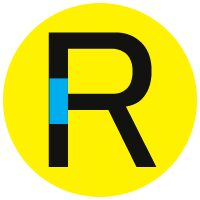
<style>
.page{position:relative;width:200px;height:200px;background:#fff200}
.page>*{position:absolute;margin:0}
.t1{font:200.5px "MS-UIGothic";letter-spacing:0.055em;color:#121211}
</style>
<div class="page">
<p class="t1" style="left:48px;top:32px;width:109px;height:135px">R</p>
</div>
